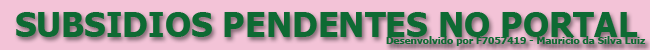
<style>
.page{position:relative;width:650px;height:50px;background:#f3c3d7}
.page>*{position:absolute;margin:0}
.t1{font:34px "Tahoma-Bold";color:#0e6a33}
.t2{font:10px "Tahoma-Bold";color:#0e6a33}
</style>
<div class="page">
<p class="t1" style="left:16px;top:12px;width:622px;height:25px">SUBSIDIOS PENDENTES NO PORTAL</p>
<p class="t2" style="left:386px;top:36px;width:260px;height:10px">Desenvolvido por F7057419 - Mauricio da Silva Luiz</p>
</div>
